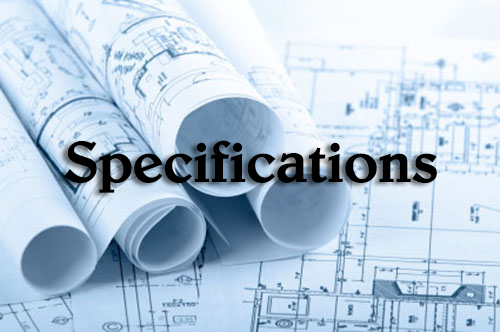
<style>
.page{position:relative;width:500px;height:332px}
.page>*{position:absolute;margin:0}
.t1{font:60px "Belwe-Bold";color:#000000}
</style>
<div class="page">
<p class="t1" style="left:64px;top:140px;width:373px;height:53px">Specifications</p>
</div>
